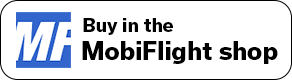
<style>
.page{position:relative;width:292px;height:80px;background:#ffffff}
.page>*{position:absolute;margin:0}
.t1{font:18px "Usual-ExtraBold";color:#000000}
.t2{font:24px "Usual-ExtraBold";color:#000000}
</style>
<div class="page">
<p class="t1" style="left:83px;top:18px;width:90px;height:17px">Buy in the</p>
<p class="t2" style="left:82px;top:41px;width:196px;height:23px">MobiFlight shop</p>
</div>
